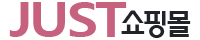
<style>
.page{position:relative;width:200px;height:40px;background:#ffffff}
.page>*{position:absolute;margin:0}
.t1{font:47.5px "MalgunGothicBold";letter-spacing:-0.05em;color:#c6627e;scale:1.15 1}
.t2{font:29.2px "MoeumTR-HM";letter-spacing:-0.1em;color:#222328;scale:1.1 1}
</style>
<div class="page">
<p class="t1" style="left:9px;top:2px;width:118px;height:35px">JUST</p>
<p class="t2" style="left:121px;top:10px;width:70px;height:28px">쇼핑몰</p>
</div>
